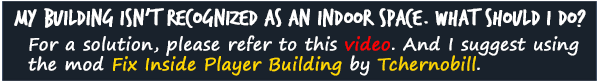
<style>
.page{position:relative;width:600px;height:82px;background:#19222c}
.page>*{position:absolute;margin:0}
.t1{font:24.2px "TrashHand";color:#ffffff;font-weight:bold}
.t2{font:17.1px "SegoePrint";color:#ffffff;font-weight:bold}
.t3{font:17.1px "SegoePrint";color:#ff0000;font-weight:bold}
.t4{font:17.1px "SegoePrint";color:#ffd800;font-weight:bold}
.t5{font:17.1px "SegoePrint";color:#fad301;font-weight:bold}
</style>
<div class="page">
<p class="t1" style="left:14px;top:8px;width:572px;height:20px">My building isn't recognized as an indoor space. What should I do?</p>
<p class="t2" style="left:28px;top:35px;width:551px;height:41px">For a solution, please refer to this <span class="t3">video</span>. And I suggest using <br>the mod <span class="t4">Fix Inside Player Building</span> by <span class="t5">Tchernobill</span>.</p>
</div>
